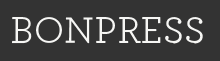
<style>
.page{position:relative;width:220px;height:61px;background:#333333}
.page>*{position:absolute;margin:0}
.t1{font:38.7px "ArcherPro-Book";color:#f6f6f4;text-transform:uppercase}
</style>
<div class="page">
<p class="t1" style="left:12px;top:17px;width:191px;height:27px">BonPRess</p>
</div>
